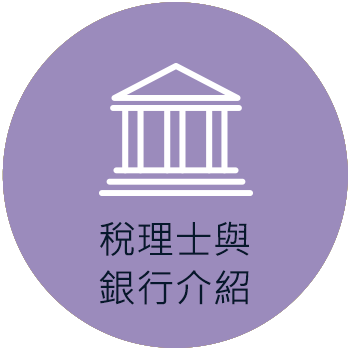
<style>
.page{position:relative;width:350px;height:350px;background:#9b8bbc}
.page>*{position:absolute;margin:0}
.t1{font:38.4px/48.5px "MicrosoftJhengHeiRegular";color:#06182c}
</style>
<div class="page">
<p class="t1" style="left:99px;top:221px;width:150px;height:84px;text-align:center">稅理士與<br>銀行介紹</p>
</div>
